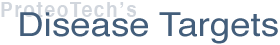
<style>
.page{position:relative;width:280px;height:45px;background:#ffffff}
.page>*{position:absolute;margin:0}
.t1{font:20.9px "Helvetica-Bold";letter-spacing:0.085em;color:#d1d6dd;scale:0.91 1}
.t2{font:33px "Helvetica";color:#435e7b;scale:1.11 1}
</style>
<div class="page">
<p class="t1" style="left:1px;top:2px;width:135px;height:15px">ProteoTech’s</p>
<p class="t2" style="left:20px;top:12px;width:258px;height:32px">Disease Targets</p>
</div>
